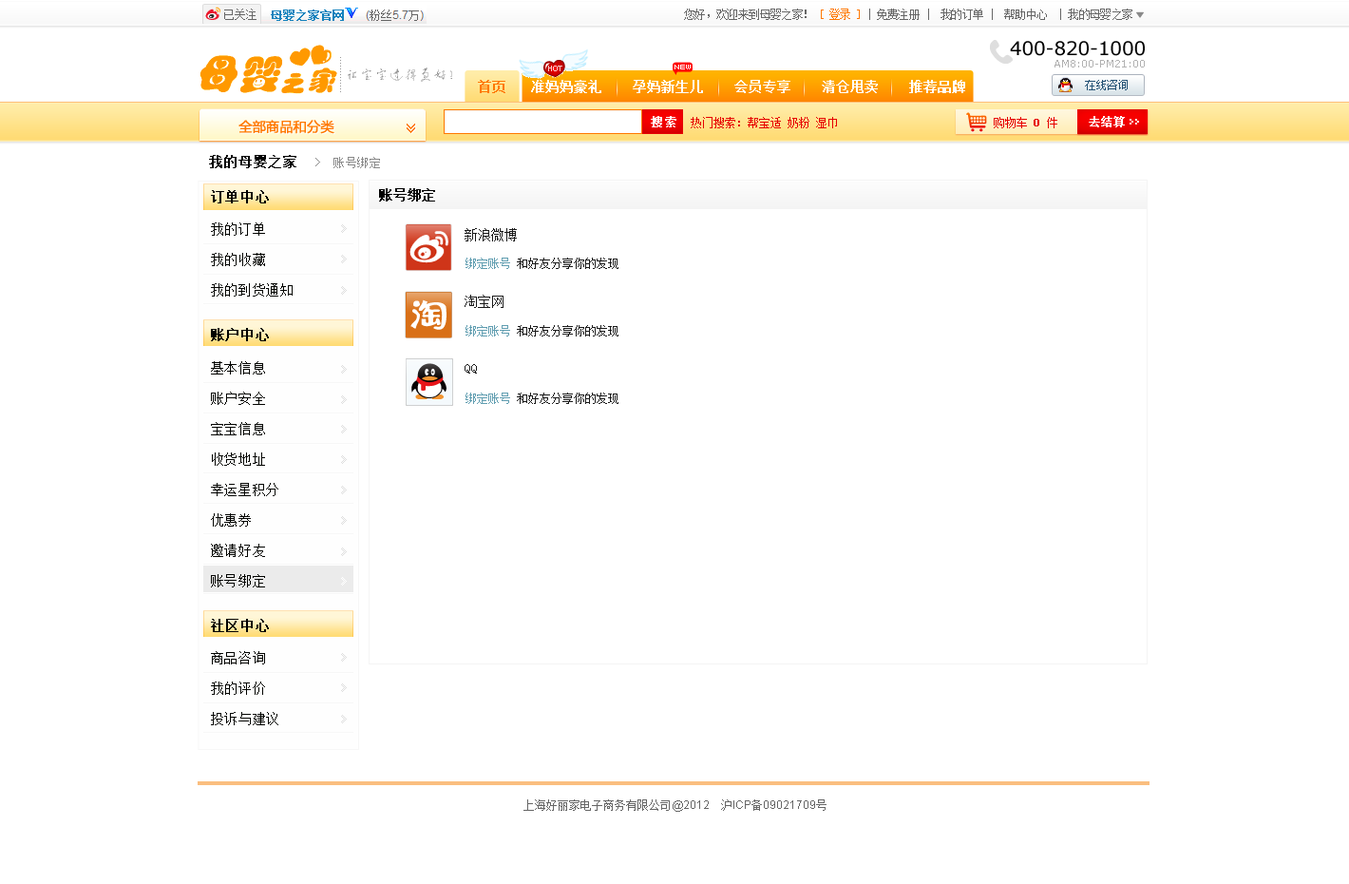
<style>
.page{position:relative;width:1349px;height:884px;background:#ffffff}
.page>*{position:absolute;margin:0}
.t1{font:11.4px "SimSun";letter-spacing:-0.05em;color:#666666}
.t2{font:11.4px "SimSun";letter-spacing:-0.05em;color:#ff7800}
.t3{font:19px "Verdana";letter-spacing:-0.01em;color:#000000}
.t4{font:5.7px "04b08";color:#ffffff}
.t5{font:10.5px "Verdana";color:#b1b1b1}
.t6{font:13.3px "SimSun";color:#ff7800;font-weight:bold}
.t7{font:13.3px "SimSun";color:#ffffff;font-weight:bold}
.t8{font:13.3px "MicrosoftYaHei";color:#ff7800;font-weight:bold}
.t9{font:11.4px "SimSun";color:#ff7800;font-weight:bold}
.t10{font:11.4px "SimSun";letter-spacing:0.2em;color:#ffffff;font-weight:bold}
.t11{font:11.4px "SimSun";color:#e60000}
.t12{font:11.4px "SimSun";color:#e60000;font-weight:bold}
.t13{font:11.4px "SimSun";color:#ffffff;font-weight:bold}
.t14{font:11.4px "SimSun";letter-spacing:0.05em;color:#898989}
.t15{font:13.3px "SimSun";letter-spacing:0.05em;color:#000000;font-weight:bold}
.t16{font:13.3px "SimSun";color:#000000;font-weight:bold}
.t17{font:13.3px/30.4px "SimSun";letter-spacing:0.05em;color:#020300}
.t18{font:13.3px/66.5px "SimSun";color:#1a1a1a}
.t19{font:11.4px "SimSun";color:#1a1a1a}
.t20{font:11.4px "SimSun";color:#619eb1}
.t21{font:13.3px "SimSun";letter-spacing:0.05em;color:#020300;font-weight:bold}
.t22{font:11.4px "SimSun";color:#666666}
.t23{font:11.4px "ArialMT";color:#666666}
</style>
<div class="page">
<p class="t1" style="left:684px;top:9px;width:449px;height:11px">您好，欢迎来到母婴之家！ <span class="t2">[ 登录 ]</span> | 免费注册 |  我的订单 |  帮助中心  | 我的母婴之家</p>
<p class="t3" style="left:1010px;top:41px;width:135px;height:15px">400-820-1000</p>
<p class="t4" style="left:675px;top:65px;width:16px;height:4px">NEW</p>
<p class="t5" style="left:1055px;top:60px;width:90px;height:7px">AM8:00-PM21:00</p>
<p class="t6" style="left:478px;top:80px;width:28px;height:13px">首页</p>
<p class="t7" style="left:531px;top:80px;width:434px;height:13px">准妈妈豪礼    孕妈新生儿    会员专享    清仓甩卖    推荐品牌</p>
<p class="t8" style="left:239px;top:120px;width:95px;height:14px">全部商品和分类</p>
<p class="t9" style="left:407px;top:124px;width:8px;height:5px;rotate:90deg">&gt;</p>
<p class="t10" style="left:651px;top:116px;width:26px;height:11px">搜索</p>
<p class="t11" style="left:691px;top:117px;width:146px;height:11px">热门搜索：帮宝适 奶粉 湿巾</p>
<p class="t11" style="left:994px;top:117px;width:64px;height:11px">购物车 <span class="t12">0 </span>件</p>
<p class="t13" style="left:1089px;top:116px;width:36px;height:11px">去结算</p>
<p class="t9" style="left:407px;top:127px;width:8px;height:6px;rotate:90deg">&gt;</p>
<p class="t14" style="left:209px;top:155px;width:171px;height:13px"><span class="t15">我的母婴之家  </span>&gt;  账号绑定</p>
<p class="t15" style="left:211px;top:190px;width:58px;height:13px">订单中心</p>
<p class="t16" style="left:379px;top:188px;width:56px;height:13px">账号绑定</p>
<p class="t17" style="left:211px;top:222px;width:82px;height:74px">我的订单<br>我的收藏<br>我的到货通知</p>
<p class="t18" style="left:465px;top:228px;width:52px;height:145px">新浪微博<br>淘宝网<br>QQ</p>
<p class="t19" style="left:466px;top:258px;width:153px;height:11px"><span class="t20">绑定账号 </span>和好友分享你的发现</p>
<p class="t21" style="left:211px;top:328px;width:58px;height:13px">账户中心</p>
<p class="t19" style="left:466px;top:325px;width:153px;height:11px"><span class="t20">绑定账号 </span>和好友分享你的发现</p>
<p class="t17" style="left:211px;top:361px;width:67px;height:226px">基本信息<br>账户安全<br>宝宝信息<br>收货地址<br>幸运星积分<br>优惠券<br>邀请好友<br>账号绑定</p>
<p class="t19" style="left:466px;top:392px;width:153px;height:12px"><span class="t20">绑定账号 </span>和好友分享你的发现</p>
<p class="t15" style="left:211px;top:619px;width:58px;height:13px">社区中心</p>
<p class="t17" style="left:211px;top:651px;width:67px;height:74px">商品咨询<br>我的评价<br>投诉与建议</p>
<p class="t22" style="left:524px;top:799px;width:303px;height:13px">上海好丽家电子商务有限公司<span class="t23">@2012    </span>沪<span class="t23">ICP</span>备<span class="t23">09021709</span>号</p>
</div>
